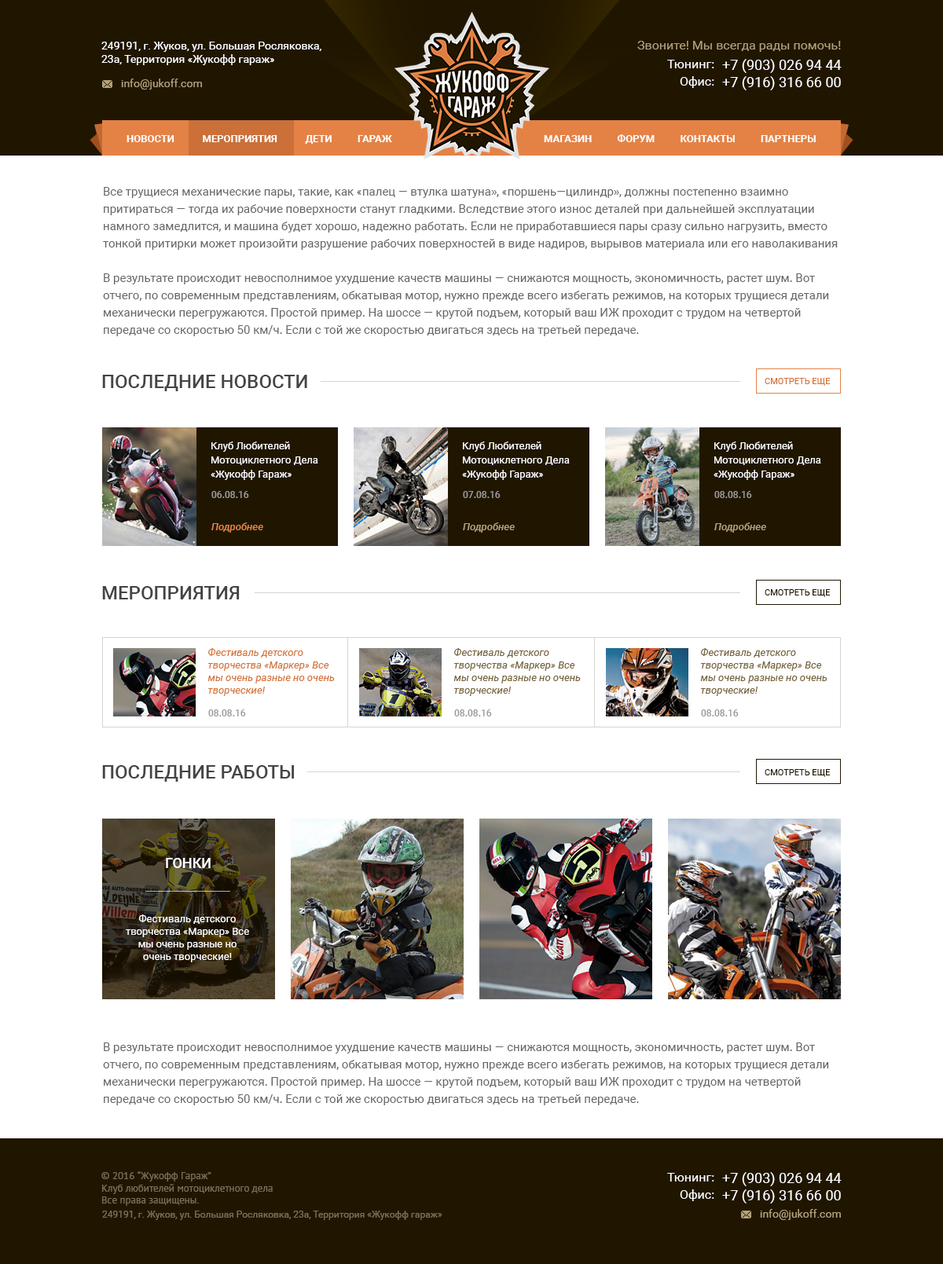
<style>
.page{position:relative;width:943px;height:1264px;background:#ffffff}
.page>*{position:absolute;margin:0}
.t1{font:11px "Roboto-Regular";color:#ffffff}
.t2{font:12.6px "Roboto-Regular";color:#b3a078}
.t3{font:12.6px "Roboto-Regular";color:#ffffff}
.t4{font:14.1px "Roboto-Regular";color:#ffffff;text-transform:uppercase}
.t5{font:11px "Roboto-Regular";color:#b3a078}
.t6{font:10.2px "Roboto-Bold";color:#ffffff;text-transform:uppercase}
.t7{font:11.8px/17.3px "Roboto-Regular";color:#666666}
.t8{font:18.9px "Roboto-Medium";color:#444444;text-transform:uppercase}
.t9{font:8.6px "Roboto-Regular";color:#d37337;text-transform:uppercase}
.t10{font:10.2px/14.1px "Roboto-Regular";color:#ffffff}
.t11{font:9.4px "Roboto-Medium";color:#999999}
.t12{font:10.2px "Roboto-MediumItalic";color:#e48246}
.t13{font:10.2px "Roboto-MediumItalic";color:#b3a078}
.t14{font:8.6px "Roboto-Regular";color:#201600;text-transform:uppercase}
.t15{font:10.2px/12.6px "Roboto-Italic";color:#d37337}
.t16{font:10.2px/12.6px "Roboto-Italic";color:#756239}
.t17{font:14.1px "Roboto-Medium";color:#ffffff;text-transform:uppercase}
.t18{font:10.2px/12.6px "Roboto-Regular";color:#ffffff}
.t19{font:10.2px "PTSans-Regular";color:#7d7055}
.t20{font:9.4px "Roboto-Regular";color:#7d7055}
</style>
<div class="page">
<p class="t1" style="left:101px;top:42px;width:220px;height:23px">249191, г. Жуков, ул. Большая Росляковка,<br>23а, Территория «Жукофф гараж»</p>
<p class="t2" style="left:637px;top:41px;width:204px;height:11px">Звоните! Мы всегда рады помочь!</p>
<p class="t3" style="left:667px;top:60px;width:47px;height:8px">Тюнинг:</p>
<p class="t4" style="left:722px;top:59px;width:120px;height:31px">+7 (903) 026 94 44<br>+7 (916) 316 66 00</p>
<p class="t3" style="left:680px;top:76px;width:34px;height:12px">Офис:</p>
<p class="t5" style="left:121px;top:79px;width:81px;height:11px">info@jukoff.com</p>
<p class="t6" style="left:127px;top:135px;width:265px;height:9px">Новости           Мероприятия           дети          Гараж</p>
<p class="t6" style="left:544px;top:134px;width:272px;height:8px">Магазин          Форум          Контакты          Партнеры</p>
<p class="t7" style="left:103px;top:187px;width:735px;height:149px">Все трущиеся механические пары, такие, как «палец — втулка шатуна», «поршень—цилиндр», должны постепенно взаимно притираться — тогда их рабочие поверхности станут гладкими. Вследствие этого износ деталей при дальнейшей эксплуатации намного замедлится, и машина будет хорошо, надежно работать. Если не приработавшиеся пары сразу сильно нагрузить, вместо тонкой притирки может произойти разрушение рабочих поверхностей в виде надиров, вырывов материала или его наволакивания<br><br>В результате происходит невосполнимое ухудшение качеств машины — снижаются мощность, экономичность, растет шум. Вот отчего, по современным представлениям, обкатывая мотор, нужно прежде всего избегать режимов, на которых трущиеся детали механически перегружаются. Простой пример. На шоссе — крутой подъем, который ваш ИЖ проходит с трудом на четвертой передаче со скоростью 50 км/ч. Если с той же скоростью двигаться здесь на третьей передаче.</p>
<p class="t8" style="left:102px;top:375px;width:205px;height:16px">последние новости</p>
<p class="t9" style="left:765px;top:378px;width:66px;height:8px">Смотреть еще</p>
<p class="t10" style="left:211px;top:442px;width:107px;height:38px">Клуб Любителей <br>Мотоциклетного Дела <br>«Жукофф Гараж»</p>
<p class="t10" style="left:462px;top:442px;width:108px;height:38px">Клуб Любителей <br>Мотоциклетного Дела <br>«Жукофф Гараж»</p>
<p class="t10" style="left:714px;top:442px;width:107px;height:38px">Клуб Любителей <br>Мотоциклетного Дела <br>«Жукофф Гараж»</p>
<p class="t11" style="left:211px;top:491px;width:38px;height:7px">06.08.16</p>
<p class="t11" style="left:463px;top:491px;width:38px;height:7px">07.08.16</p>
<p class="t11" style="left:714px;top:491px;width:38px;height:7px">08.08.16</p>
<p class="t12" style="left:211px;top:523px;width:52px;height:10px">Подробнее</p>
<p class="t13" style="left:463px;top:523px;width:52px;height:10px">Подробнее</p>
<p class="t13" style="left:714px;top:523px;width:52px;height:10px">Подробнее</p>
<p class="t8" style="left:102px;top:586px;width:138px;height:14px">мероприятия</p>
<p class="t14" style="left:765px;top:589px;width:66px;height:8px">Смотреть еще</p>
<p class="t15" style="left:207px;top:648px;width:128px;height:48px">Фестиваль детского творчества «Маркер» Все мы очень разные но очень творческие!</p>
<p class="t16" style="left:453px;top:648px;width:128px;height:48px">Фестиваль детского творчества «Маркер» Все мы очень разные но очень творческие!</p>
<p class="t16" style="left:700px;top:648px;width:128px;height:48px">Фестиваль детского творчества «Маркер» Все мы очень разные но очень творческие!</p>
<p class="t11" style="left:208px;top:710px;width:38px;height:7px">08.08.16</p>
<p class="t11" style="left:454px;top:710px;width:38px;height:7px">08.08.16</p>
<p class="t11" style="left:701px;top:710px;width:38px;height:7px">08.08.16</p>
<p class="t8" style="left:102px;top:765px;width:192px;height:17px">последние работы</p>
<p class="t14" style="left:765px;top:769px;width:66px;height:8px">Смотреть еще</p>
<p class="t17" style="left:166px;top:858px;width:45px;height:10px">гонки</p>
<p class="t18" style="left:126px;top:915px;width:123px;height:48px;text-align:center">Фестиваль детского творчества «Маркер» Все мы очень разные но очень творческие!</p>
<p class="t7" style="left:103px;top:1043px;width:726px;height:63px">В результате происходит невосполнимое ухудшение качеств машины — снижаются мощность, экономичность, растет шум. Вот отчего, по современным представлениям, обкатывая мотор, нужно прежде всего избегать режимов, на которых трущиеся детали механически перегружаются. Простой пример. На шоссе — крутой подъем, который ваш ИЖ проходит с трудом на четвертой передаче со скоростью 50 км/ч. Если с той же скоростью двигаться здесь на третьей передаче.</p>
<p class="t19" style="left:101px;top:1172px;width:172px;height:34px">© 2016 “Жукофф Гараж”<br>Клуб любителей мотоциклетного дела<br>Все права защищены.</p>
<p class="t3" style="left:667px;top:1173px;width:47px;height:9px">Тюнинг:</p>
<p class="t4" style="left:722px;top:1173px;width:120px;height:31px">+7 (903) 026 94 44<br>+7 (916) 316 66 00</p>
<p class="t3" style="left:680px;top:1190px;width:34px;height:12px">Офис:</p>
<p class="t20" style="left:102px;top:1211px;width:340px;height:9px">249191, г. Жуков, ул. Большая Росляковка, 23а, Территория «Жукофф гараж»</p>
<p class="t5" style="left:760px;top:1209px;width:81px;height:11px">info@jukoff.com</p>
</div>
